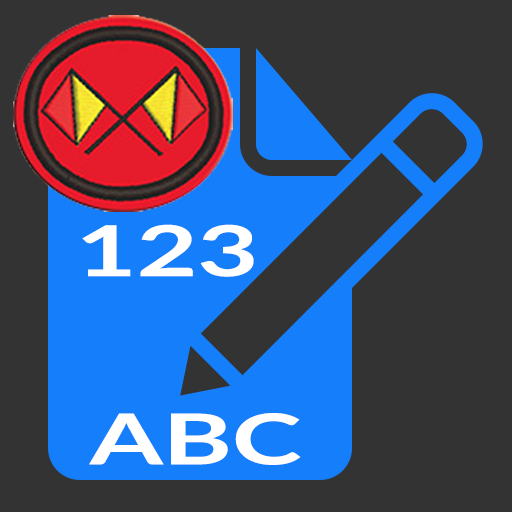
<style>
.page{position:relative;width:512px;height:512px;background:#333333}
.page>*{position:absolute;margin:0}
.t1{font:70px "Lato-Bold";color:#ffffff;scale:1.5 1}
</style>
<div class="page">
<p class="t1" style="left:82px;top:224px;width:172px;height:53px">123</p>
<p class="t1" style="left:89px;top:413px;width:212px;height:52px">ABC</p>
</div>
